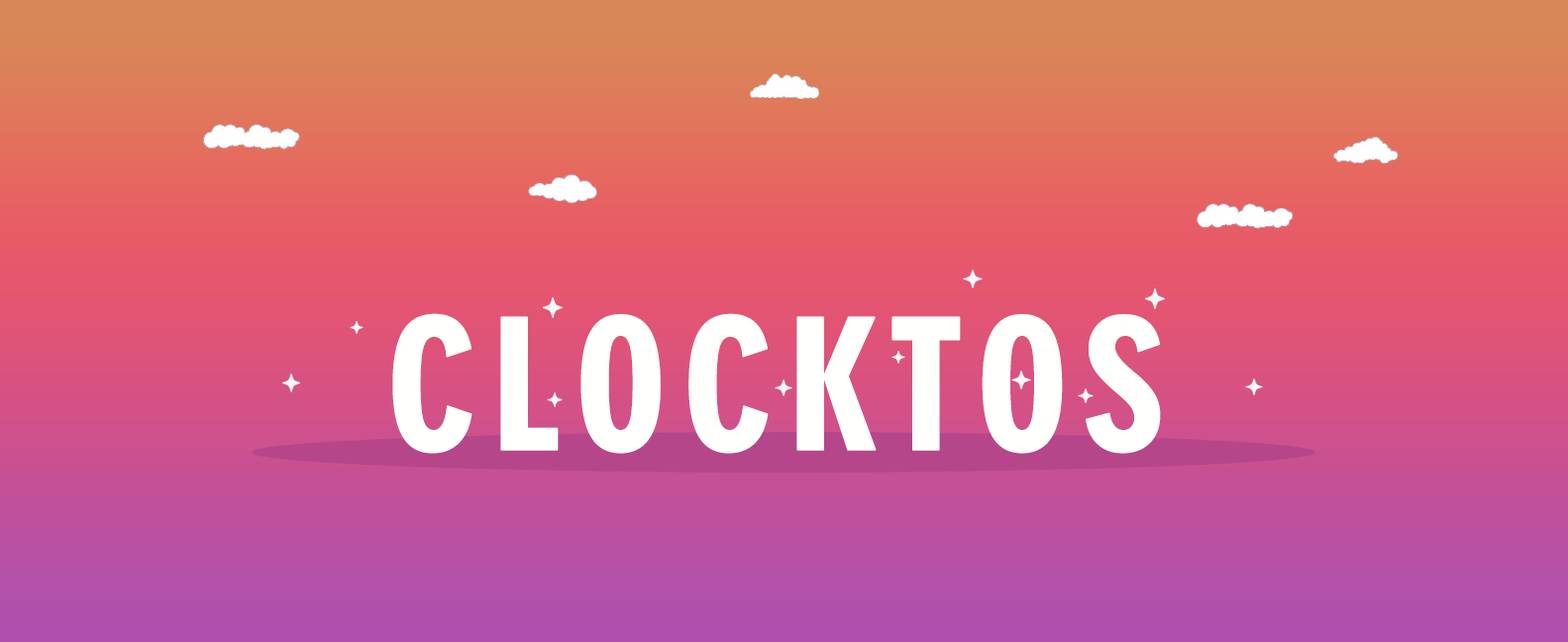
<style>
.page{position:relative;width:1568px;height:642px}
.page>*{position:absolute;margin:0}
.t1{font:173.3px "Geometric706BT-BlackCondensedB";letter-spacing:0.06em;color:#fffffd;font-weight:bold}
</style>
<div class="page">
<p class="t1" style="left:392px;top:313px;width:769px;height:141px">CLOCKTOS</p>
</div>
